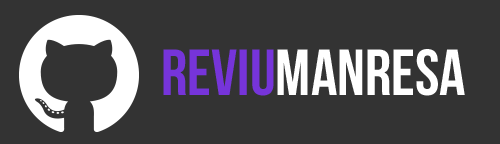
<style>
.page{position:relative;width:500px;height:144px;background:#333333}
.page>*{position:absolute;margin:0}
.t1{font:65.1px "BebasNeue";color:#ffffff}
.t2{font:65.1px "BebasNeue";color:#7634da}
</style>
<div class="page">
<p class="t1" style="left:163px;top:49px;width:302px;height:47px"><span class="t2">REVIU</span>MANRESA</p>
</div>
